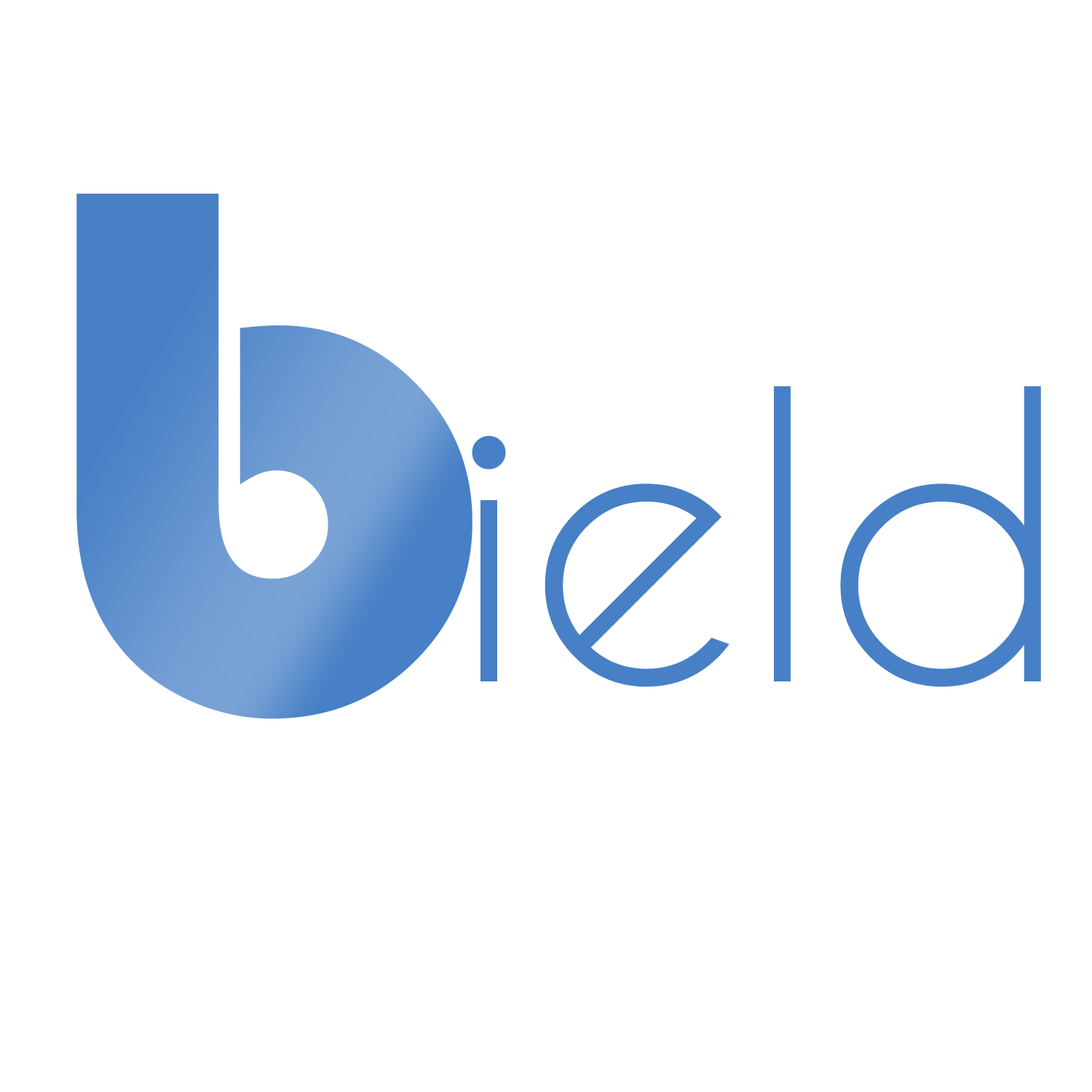
<style>
.page{position:relative;width:1092px;height:1092px;background:#ffffff}
.page>*{position:absolute;margin:0}
.t1{font:776.8px "Bauhaus93";color:#5a8dcc}
.t2{font:377.8px "CaviarDreams";color:#4780c6}
</style>
<div class="page">
<p class="t1" style="left:76px;top:194px;width:396px;height:525px">b</p>
<p class="t2" style="left:472px;top:386px;width:569px;height:301px">ield</p>
</div>
